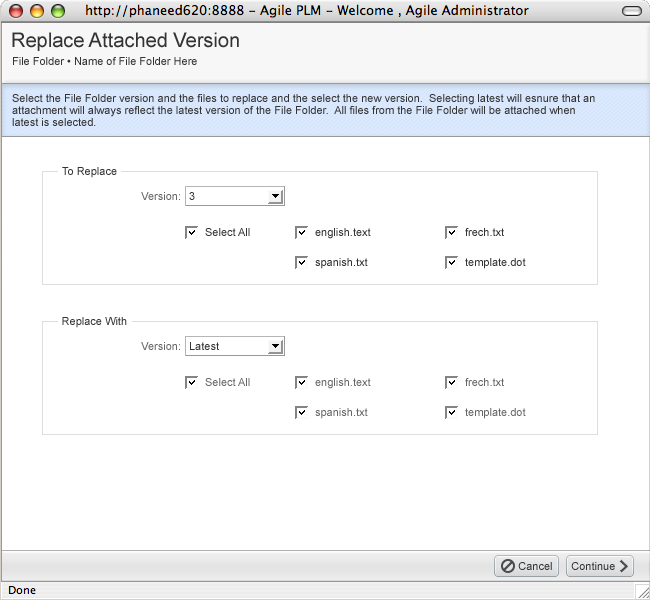
<style>
.page{position:relative;width:650px;height:600px;background:#ffffff}
.page>*{position:absolute;margin:0}
.t1{font:20px "ArialMT";color:#333333}
.t2{font:11px "ArialMT";color:#333333}
.t3{font:11px/12px "ArialMT";color:#333333}
.t4{font:11px "ArialMT";color:#666666}
</style>
<div class="page">
<p class="t1" style="left:12px;top:32px;width:227px;height:19px">Replace Attached Version</p>
<p class="t2" style="left:13px;top:57px;width:184px;height:8px">File Folder • Name of File Folder Here</p>
<p class="t3" style="left:12px;top:94px;width:583px;height:32px">Select the File Folder version and the files to replace and the select the new version.  Selecting latest will esnure that an <br>attachment will always reflect the latest version of the File Folder.  All files from the File Folder will be attached when<br>latest is selected.</p>
<p class="t2" style="left:62px;top:167px;width:55px;height:11px">To Replace</p>
<p class="t4" style="left:141px;top:192px;width:39px;height:8px">Version:</p>
<p class="t2" style="left:189px;top:192px;width:6px;height:8px">3</p>
<p class="t2" style="left:205px;top:228px;width:45px;height:8px">Select All</p>
<p class="t2" style="left:315px;top:228px;width:56px;height:11px">english.text</p>
<p class="t2" style="left:465px;top:228px;width:39px;height:8px">frech.txt</p>
<p class="t2" style="left:315px;top:258px;width:53px;height:11px">spanish.txt</p>
<p class="t2" style="left:465px;top:258px;width:61px;height:11px">template.dot</p>
<p class="t2" style="left:62px;top:317px;width:65px;height:11px">Replace With</p>
<p class="t4" style="left:141px;top:342px;width:39px;height:8px">Version:</p>
<p class="t2" style="left:190px;top:342px;width:29px;height:8px">Latest</p>
<p class="t4" style="left:205px;top:378px;width:45px;height:8px">Select All</p>
<p class="t4" style="left:315px;top:378px;width:56px;height:11px">english.text</p>
<p class="t4" style="left:465px;top:378px;width:39px;height:8px">frech.txt</p>
<p class="t4" style="left:315px;top:408px;width:53px;height:11px">spanish.txt</p>
<p class="t4" style="left:465px;top:408px;width:61px;height:11px">template.dot</p>
<p class="t2" style="left:518px;top:562px;width:34px;height:8px">Cancel</p>
<p class="t2" style="left:571px;top:562px;width:44px;height:8px">Continue</p>
</div>
